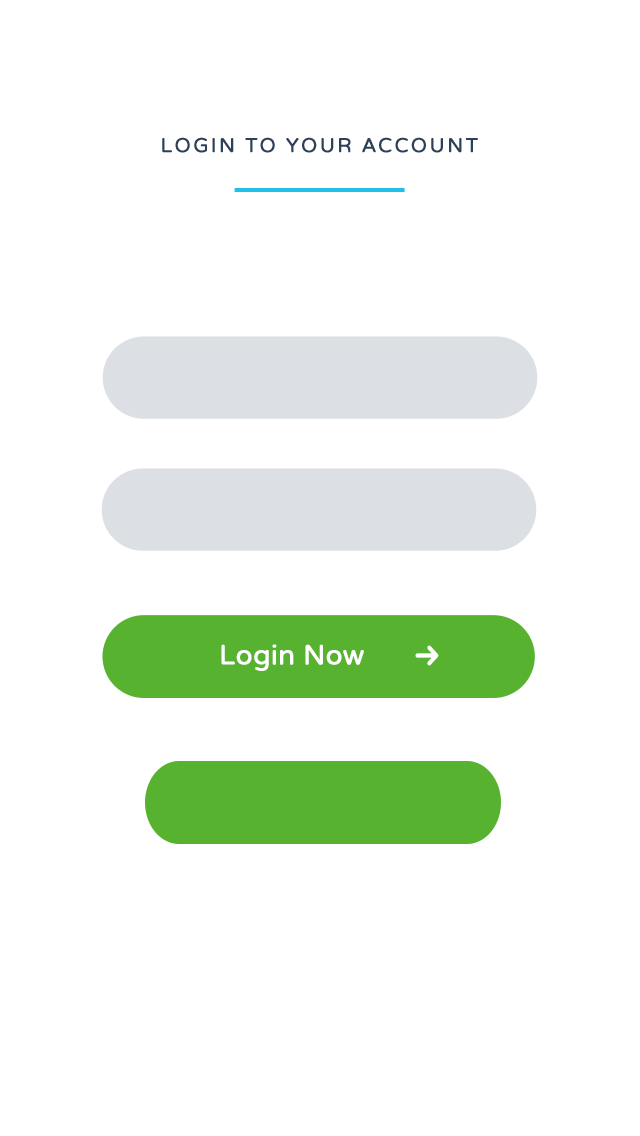
<style>
.page{position:relative;width:640px;height:1136px;background:#ffffff}
.page>*{position:absolute;margin:0}
.t1{font:20px "VarelaRound";letter-spacing:0.1em;color:#2c4057;font-weight:bold}
.t2{font:27.1px "VarelaRound";color:#ffffff;font-weight:bold}
</style>
<div class="page">
<p class="t1" style="left:162px;top:137px;width:316px;height:16px">LOGIN TO YOUR ACCOUNT</p>
<p class="t2" style="left:221px;top:644px;width:143px;height:27px">Login Now</p>
</div>
